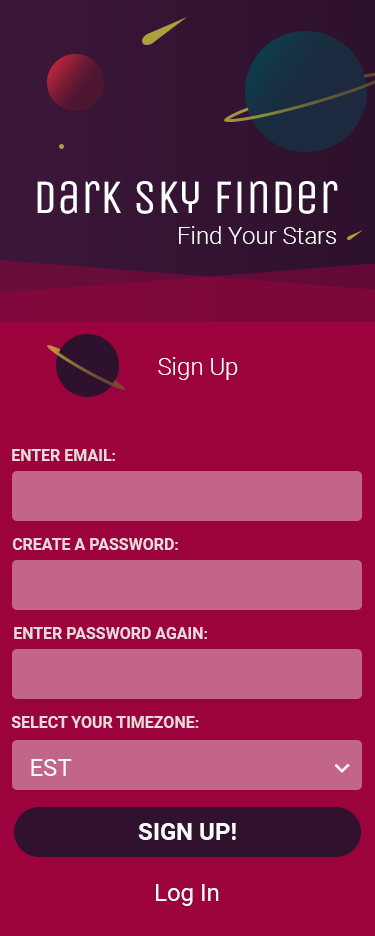
<style>
.page{position:relative;width:375px;height:936px;background:#9c033d}
.page>*{position:absolute;margin:0}
.t1{font:48px "UnicaOne-Regular";color:#ffffff}
.t2{font:24px "Roboto-Light";color:#ffffff}
.t3{font:16px "Roboto-Bold";color:#e9d9dd}
.t4{font:24px "Roboto-Regular";color:#fafafa}
.t5{font:24px "Roboto-Bold";color:#fafafa}
</style>
<div class="page">
<p class="t1" style="left:37px;top:181px;width:301px;height:33px">Dark Sky Finder</p>
<p class="t2" style="left:179px;top:226px;width:157px;height:18px">Find Your Stars</p>
<p class="t2" style="left:158px;top:357px;width:80px;height:23px">Sign Up</p>
<p class="t3" style="left:12px;top:449px;width:103px;height:12px">ENTER EMAIL:</p>
<p class="t3" style="left:12px;top:538px;width:166px;height:12px">CREATE A PASSWORD:</p>
<p class="t3" style="left:14px;top:627px;width:193px;height:12px">ENTER PASSWORD AGAIN:</p>
<p class="t3" style="left:11px;top:716px;width:188px;height:12px">SELECT YOUR TIMEZONE:</p>
<p class="t4" style="left:31px;top:759px;width:41px;height:17px">EST</p>
<p class="t5" style="left:138px;top:823px;width:98px;height:17px">SIGN UP!</p>
<p class="t4" style="left:156px;top:884px;width:63px;height:22px">Log In</p>
</div>
